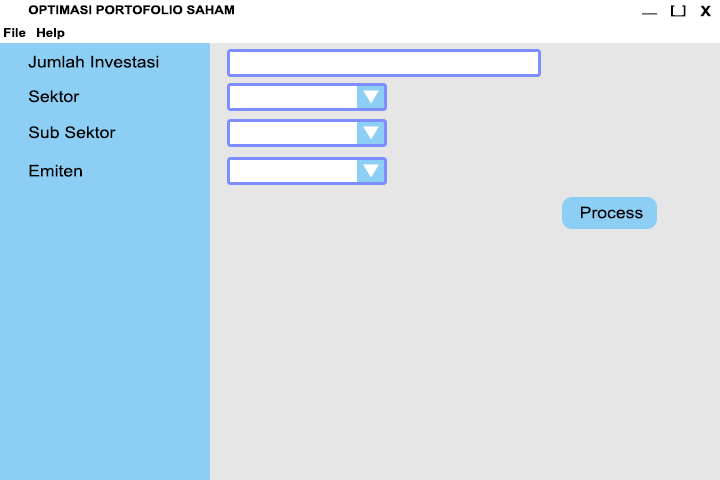
<style>
.page{position:relative;width:720px;height:480px;background:#e6e6e6}
.page>*{position:absolute;margin:0}
.t1{font:12px "Arial-BoldMT";color:#000000;scale:1.1 1}
.t2{font:14.3px "Arial-BoldMT";color:#000000;scale:1.1 1}
.t3{font:12px "Arial-BoldMT";scale:1.1 1}
.t4{font:16px "ArialMT";color:#000000;scale:1.1 1}
</style>
<div class="page">
<p class="t1" style="left:28px;top:5px;width:206px;height:10px">OPTIMASI PORTOFOLIO SAHAM</p>
<p class="t1" style="left:671px;top:5px;width:15px;height:12px">[_]</p>
<p class="t2" style="left:700px;top:5px;width:11px;height:12px">X</p>
<p class="t3" style="left:642px;top:13px;width:16px;height:2px">__</p>
<p class="t1" style="left:4px;top:28px;width:22px;height:9px">File</p>
<p class="t1" style="left:37px;top:28px;width:28px;height:12px">Help</p>
<p class="t4" style="left:28px;top:55px;width:131px;height:13px">Jumlah Investasi</p>
<p class="t4" style="left:28px;top:90px;width:52px;height:13px">Sektor</p>
<p class="t4" style="left:28px;top:126px;width:88px;height:13px">Sub Sektor</p>
<p class="t4" style="left:29px;top:164px;width:53px;height:13px">Emiten</p>
<p class="t4" style="left:581px;top:206px;width:62px;height:13px">Process</p>
</div>
